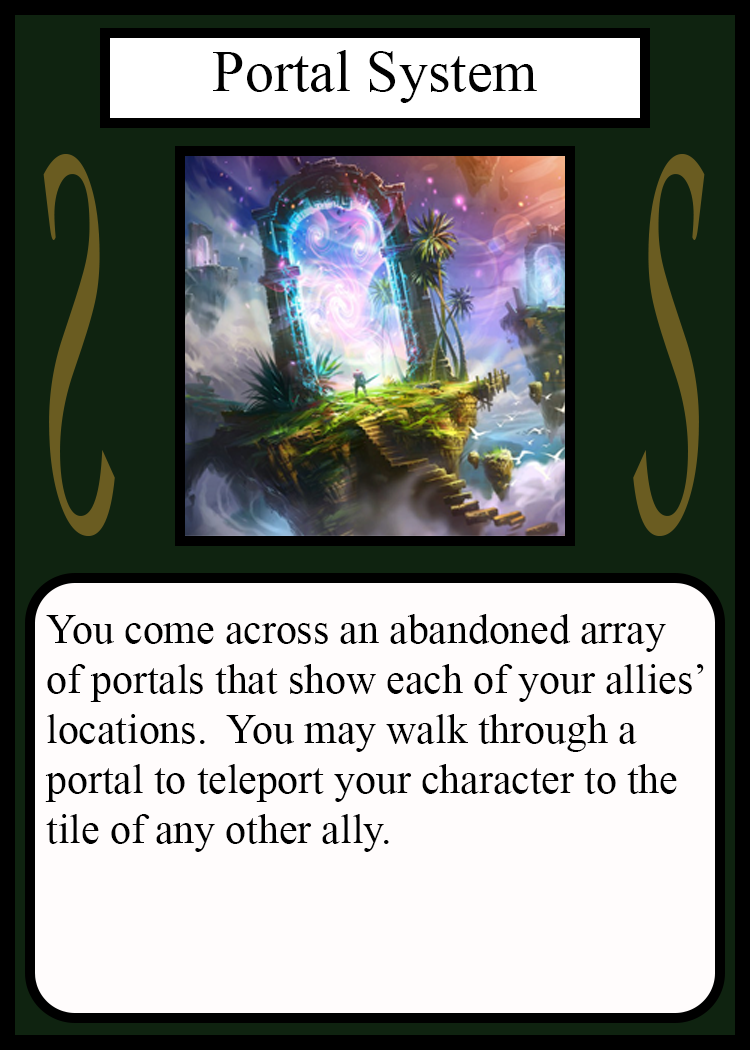
<style>
.page{position:relative;width:750px;height:1050px;background:#fffcfc}
.page>*{position:absolute;margin:0}
.t1{font:58.3px "TimesNewRomanPSMT";color:#010101}
.t2{font:548.5px "Apple-Chancery";color:#6a5c21;scale:0.27 1}
.t3{font:548.2px "Apple-Chancery";color:#6a5c21;scale:0.27 1}
.t4{font:41.7px "TimesNewRomanPSMT";color:#000000}
</style>
<div class="page">
<p class="t1" style="left:213px;top:50px;width:324px;height:53px">Portal System</p>
<p class="t2" style="left:43px;top:154px;width:72px;height:382px;rotate:180deg">S</p>
<p class="t3" style="left:633px;top:154px;width:72px;height:382px">S</p>
<p class="t4" style="left:45px;top:614px;width:659px;height:238px">You come across an abandoned array<br>of portals that show each of your allies’<br>locations.  You may walk through a<br>portal to teleport your character to the<br>tile of any other ally.</p>
</div>
